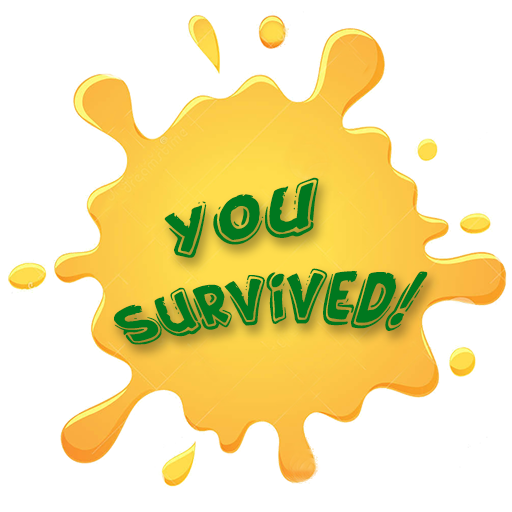
<style>
.page{position:relative;width:512px;height:512px;background:#ffffff}
.page>*{position:absolute;margin:0}
.t1{font:72.6px "FunnyKid";color:#00781f;scale:0.91 1}
</style>
<div class="page">
<p class="t1" style="left:114px;top:177px;width:314px;height:168px;text-align:center;rotate:-8deg">You <br>survived!</p>
</div>
